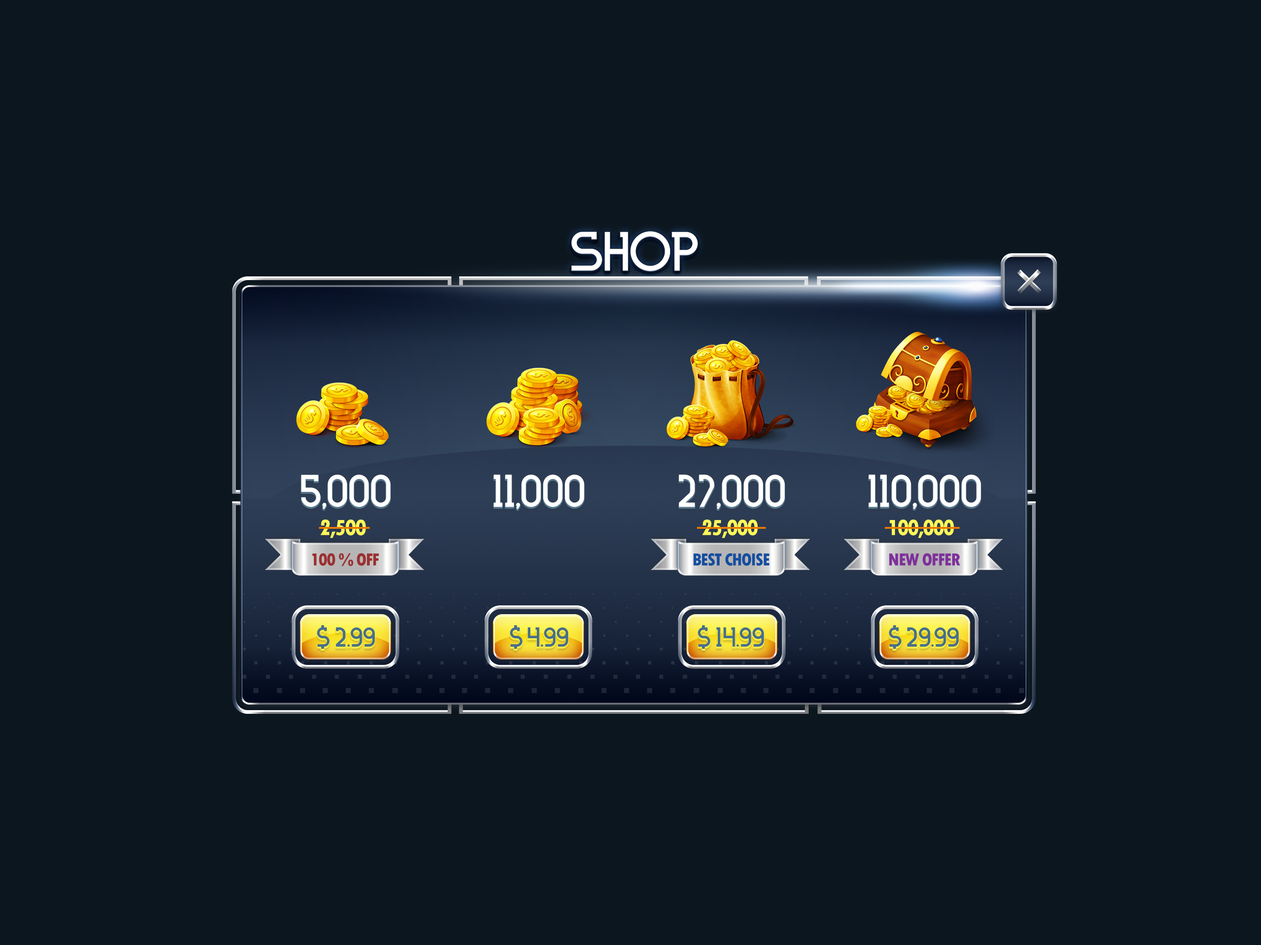
<style>
.page{position:relative;width:1261px;height:945px;background:#0c161f}
.page>*{position:absolute;margin:0}
.t1{font:55.4px "INKFERNO";letter-spacing:-0.025em;color:#ffffff;text-transform:uppercase}
.t2{font:46.2px "INKFERNO";color:#ffffff;text-transform:uppercase}
.t3{font:23.1px "TwCenMT-CondensedExtraBold";letter-spacing:-0.05em;color:#fef859;text-transform:uppercase}
.t4{font:18.5px "TwCenMT-CondensedExtraBold";letter-spacing:-0.05em;color:#9b3030;text-transform:uppercase}
.t5{font:18.5px "TwCenMT-CondensedExtraBold";letter-spacing:-0.05em;color:#154e9f;text-transform:uppercase}
.t6{font:18.5px "TwCenMT-CondensedExtraBold";letter-spacing:-0.05em;color:#7e309b;text-transform:uppercase}
.t7{font:27.7px "INKFERNO";color:#476f8b;text-transform:uppercase}
</style>
<div class="page">
<p class="t1" style="left:572px;top:231px;width:126px;height:40px">shop</p>
<p class="t2" style="left:301px;top:475px;width:90px;height:35px">5,000</p>
<p class="t2" style="left:494px;top:475px;width:90px;height:35px">11,000</p>
<p class="t2" style="left:679px;top:475px;width:106px;height:35px">27,000</p>
<p class="t2" style="left:869px;top:475px;width:112px;height:35px">110,000</p>
<p class="t3" style="left:320px;top:520px;width:46px;height:18px">2,500</p>
<p class="t3" style="left:702px;top:520px;width:56px;height:18px">25,000</p>
<p class="t3" style="left:890px;top:520px;width:64px;height:18px">100,000</p>
<p class="t4" style="left:312px;top:554px;width:67px;height:12px">100 % off</p>
<p class="t5" style="left:693px;top:554px;width:77px;height:12px">best choise</p>
<p class="t6" style="left:889px;top:554px;width:71px;height:12px">new offer</p>
<p class="t7" style="left:336px;top:627px;width:39px;height:20px">2.99</p>
<p class="t7" style="left:528px;top:627px;width:40px;height:20px">4.99</p>
<p class="t7" style="left:716px;top:627px;width:48px;height:20px">14.99</p>
<p class="t7" style="left:907px;top:627px;width:52px;height:20px">29.99</p>
</div>
